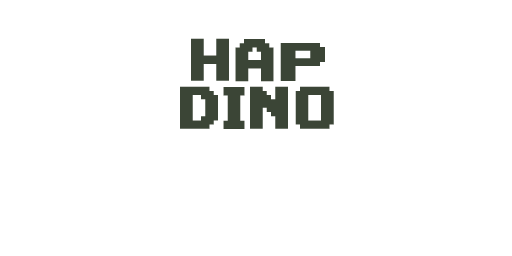
<style>
.page{position:relative;width:512px;height:256px;background:#ffffff}
.page>*{position:absolute;margin:0}
.t1{font:60px/48px "AutomBold";letter-spacing:0.025em;color:#3b4536;text-transform:uppercase}
</style>
<div class="page">
<p class="t1" style="left:180px;top:38px;width:154px;height:91px;text-align:center">HAP<br>DINO</p>
</div>
